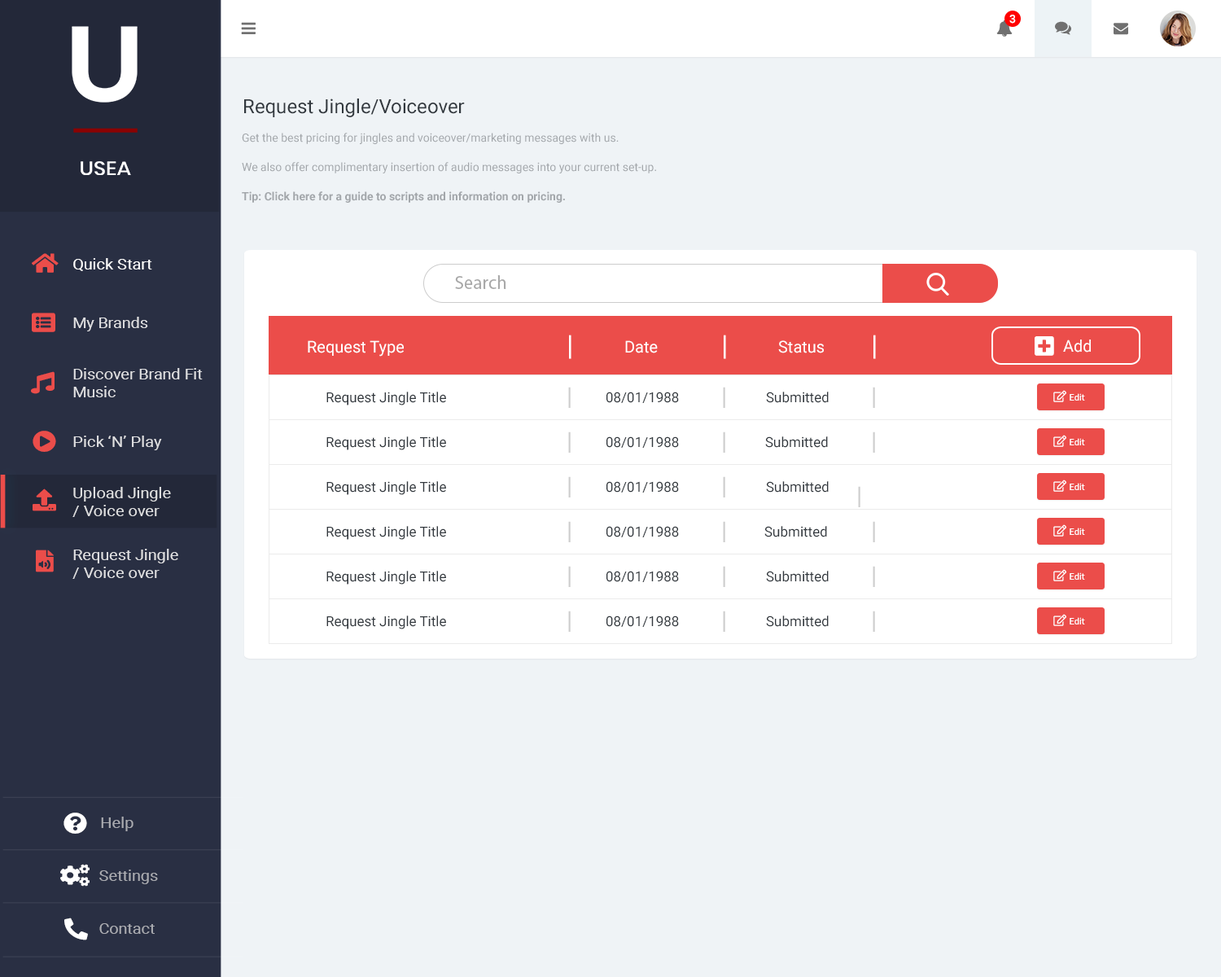
<style>
.page{position:relative;width:1221px;height:977px;background:#eff3f6}
.page>*{position:absolute;margin:0}
.t1{font:11.4px "Roboto-Medium";color:#ffffff}
.t2{font:19.5px "Roboto-Regular";color:#31373d}
.t3{font:11.4px/29.3px "Roboto-Regular";color:#a2a6aa}
.t4{font:11.4px/29.3px "Roboto-Bold";color:#a2a6aa}
.t5{font:14.9px "Roboto-Regular";color:#ffffff;scale:1.09 1}
.t6{font:18.7px "MyriadPro-Regular";color:#a9a9a9}
.t7{font:14.9px "Roboto-Regular";color:#e0e0e2;scale:1.09 1}
.t8{font:16.3px "Roboto-Regular";color:#ffffff}
.t9{font:27.7px "Roboto-Regular";color:#ffffff}
.t10{font:24.4px "Roboto-Regular";color:#cecece}
.t11{font:13.8px "Roboto-Regular";color:#31373d}
.t12{font:9px "Roboto-Medium";color:#ffffff}
.t13{font:14.9px "Roboto-Regular";color:#dfe0e1;scale:1.09 1}
.t14{font:15px "Roboto-Regular";color:#abacb2;scale:1.08 1}
</style>
<div class="page">
<p class="t1" style="left:1009px;top:15px;width:7px;height:9px">3</p>
<p class="t2" style="left:244px;top:98px;width:221px;height:19px">Request Jingle/Voiceover</p>
<p class="t3" style="left:242px;top:133px;width:414px;height:70px">Get the best pricing for jingles and voiceover/marketing messages with us.<br>We also offer complimentary insertion of audio messages into your current set-up.<br><span class="t4">Tip: Click here for a guide to scripts and information on pricing.</span></p>
<p class="t5" style="left:73px;top:258px;width:79px;height:13px">Quick Start</p>
<p class="t6" style="left:455px;top:275px;width:51px;height:14px">Search</p>
<p class="t7" style="left:73px;top:317px;width:75px;height:14px">My Brands</p>
<p class="t8" style="left:308px;top:340px;width:96px;height:16px">Request Type</p>
<p class="t9" style="left:569px;top:335px;width:2px;height:24px">|</p>
<p class="t8" style="left:625px;top:340px;width:33px;height:13px">Date</p>
<p class="t9" style="left:724px;top:335px;width:2px;height:24px">|</p>
<p class="t8" style="left:778px;top:340px;width:46px;height:13px">Status</p>
<p class="t9" style="left:873px;top:335px;width:3px;height:24px">|</p>
<p class="t8" style="left:1063px;top:339px;width:28px;height:13px">Add</p>
<p class="t7" style="left:73px;top:368px;width:130px;height:29px">Discover Brand Fit <br>Music</p>
<p class="t10" style="left:568px;top:387px;width:3px;height:21px">|</p>
<p class="t10" style="left:723px;top:387px;width:2px;height:21px">|</p>
<p class="t10" style="left:873px;top:387px;width:2px;height:21px">|</p>
<p class="t11" style="left:326px;top:391px;width:120px;height:14px">Request Jingle Title</p>
<p class="t11" style="left:606px;top:391px;width:73px;height:12px">08/01/1988</p>
<p class="t11" style="left:766px;top:391px;width:63px;height:12px">Submitted</p>
<p class="t12" style="left:1069px;top:393px;width:16px;height:7px">Edit</p>
<p class="t7" style="left:73px;top:435px;width:89px;height:15px">Pick ‘N’ Play</p>
<p class="t11" style="left:326px;top:436px;width:120px;height:14px">Request Jingle Title</p>
<p class="t10" style="left:568px;top:431px;width:3px;height:22px">|</p>
<p class="t11" style="left:606px;top:436px;width:73px;height:12px">08/01/1988</p>
<p class="t10" style="left:723px;top:431px;width:2px;height:22px">|</p>
<p class="t11" style="left:765px;top:436px;width:63px;height:12px">Submitted</p>
<p class="t10" style="left:873px;top:431px;width:2px;height:22px">|</p>
<p class="t12" style="left:1069px;top:438px;width:16px;height:7px">Edit</p>
<p class="t11" style="left:326px;top:481px;width:120px;height:14px">Request Jingle Title</p>
<p class="t10" style="left:568px;top:476px;width:3px;height:21px">|</p>
<p class="t11" style="left:606px;top:481px;width:73px;height:11px">08/01/1988</p>
<p class="t10" style="left:723px;top:476px;width:2px;height:21px">|</p>
<p class="t11" style="left:766px;top:481px;width:63px;height:11px">Submitted</p>
<p class="t10" style="left:858px;top:486px;width:2px;height:21px">|</p>
<p class="t12" style="left:1069px;top:483px;width:16px;height:7px">Edit</p>
<p class="t13" style="left:72px;top:487px;width:99px;height:30px">Upload Jingle<br>/ Voice over</p>
<p class="t10" style="left:568px;top:521px;width:3px;height:21px">|</p>
<p class="t10" style="left:723px;top:521px;width:2px;height:21px">|</p>
<p class="t10" style="left:873px;top:521px;width:2px;height:21px">|</p>
<p class="t11" style="left:326px;top:526px;width:120px;height:14px">Request Jingle Title</p>
<p class="t11" style="left:606px;top:526px;width:73px;height:11px">08/01/1988</p>
<p class="t11" style="left:764px;top:526px;width:63px;height:11px">Submitted</p>
<p class="t12" style="left:1069px;top:527px;width:16px;height:8px">Edit</p>
<p class="t7" style="left:72px;top:549px;width:106px;height:30px">Request Jingle<br>/ Voice over</p>
<p class="t10" style="left:568px;top:566px;width:3px;height:21px">|</p>
<p class="t10" style="left:723px;top:566px;width:2px;height:21px">|</p>
<p class="t10" style="left:873px;top:566px;width:2px;height:21px">|</p>
<p class="t11" style="left:326px;top:571px;width:120px;height:13px">Request Jingle Title</p>
<p class="t11" style="left:606px;top:571px;width:73px;height:11px">08/01/1988</p>
<p class="t11" style="left:766px;top:571px;width:63px;height:11px">Submitted</p>
<p class="t12" style="left:1069px;top:572px;width:16px;height:8px">Edit</p>
<p class="t11" style="left:326px;top:615px;width:120px;height:14px">Request Jingle Title</p>
<p class="t10" style="left:568px;top:610px;width:3px;height:22px">|</p>
<p class="t11" style="left:606px;top:615px;width:73px;height:12px">08/01/1988</p>
<p class="t10" style="left:723px;top:610px;width:2px;height:22px">|</p>
<p class="t11" style="left:766px;top:615px;width:63px;height:12px">Submitted</p>
<p class="t10" style="left:873px;top:610px;width:2px;height:22px">|</p>
<p class="t12" style="left:1069px;top:617px;width:16px;height:7px">Edit</p>
<p class="t14" style="left:101px;top:816px;width:32px;height:15px">Help</p>
<p class="t14" style="left:99px;top:869px;width:59px;height:15px">Settings</p>
<p class="t14" style="left:99px;top:923px;width:56px;height:11px">Contact</p>
</div>
